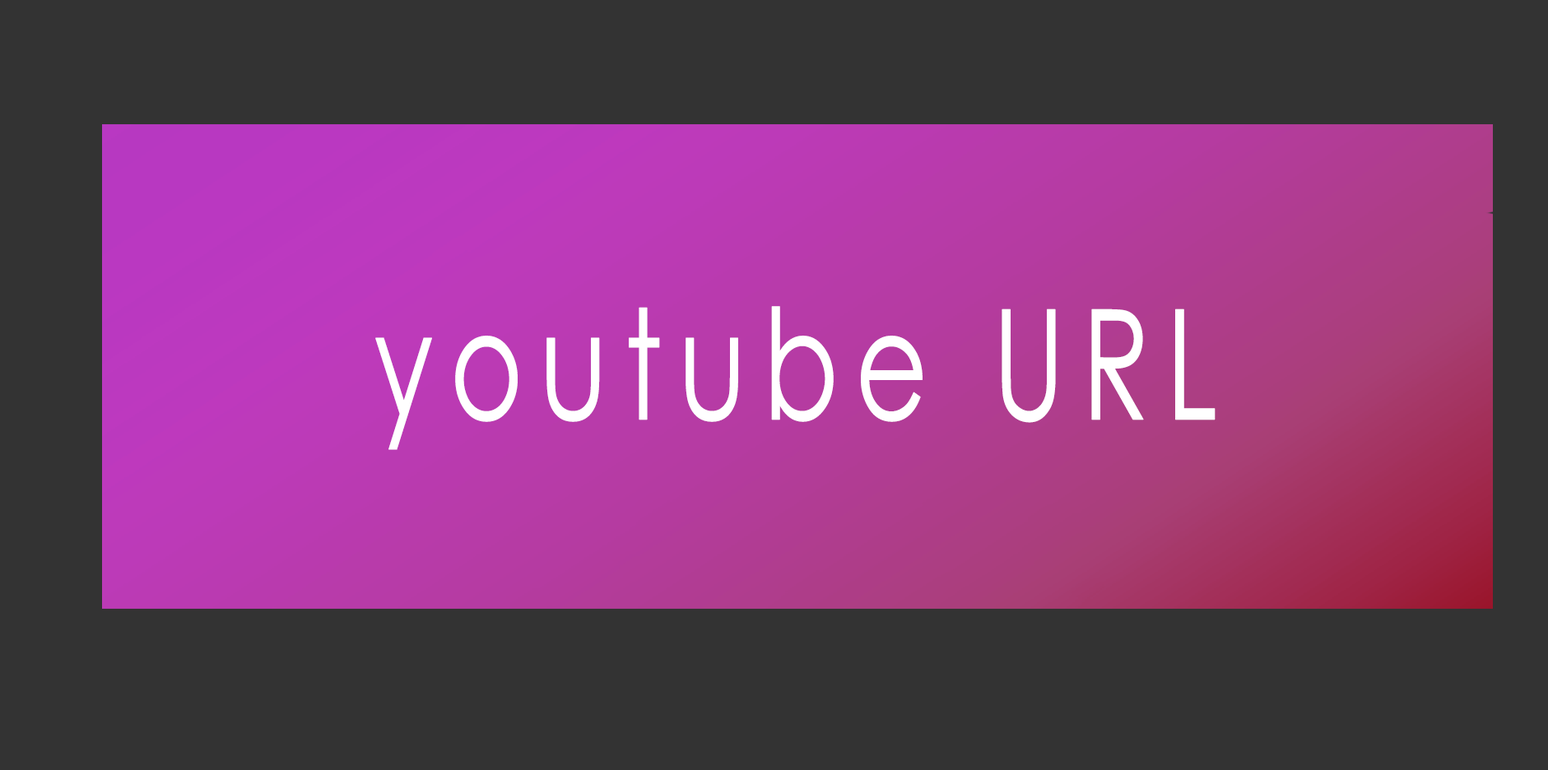
<style>
.page{position:relative;width:1548px;height:770px;background:#333333}
.page>*{position:absolute;margin:0}
.t1{font:153px "CenturyGothic";letter-spacing:0.125em;color:#ffffff;font-weight:bold;scale:0.73 1}
</style>
<div class="page">
<p class="t1" style="left:375px;top:306px;width:841px;height:144px">youtube URL</p>
</div>
